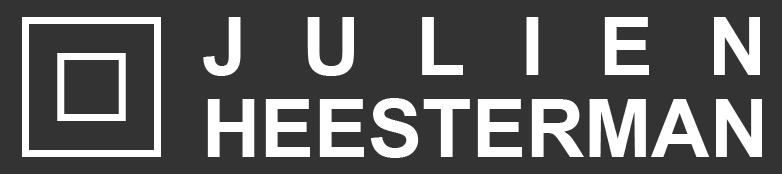
<style>
.page{position:relative;width:782px;height:174px;background:#333333}
.page>*{position:absolute;margin:0}
.t1{font:80.9px/82px "Arial-BoldMT";color:#ffffff}
.t2{font:80.9px/82px "Arial-BoldMT";letter-spacing:0.685em;color:#ffffff}
</style>
<div class="page">
<p class="t1" style="left:203px;top:17px;width:559px;height:141px"><span class="t2">JULIEN<br></span>HEESTERMAN</p>
</div>
